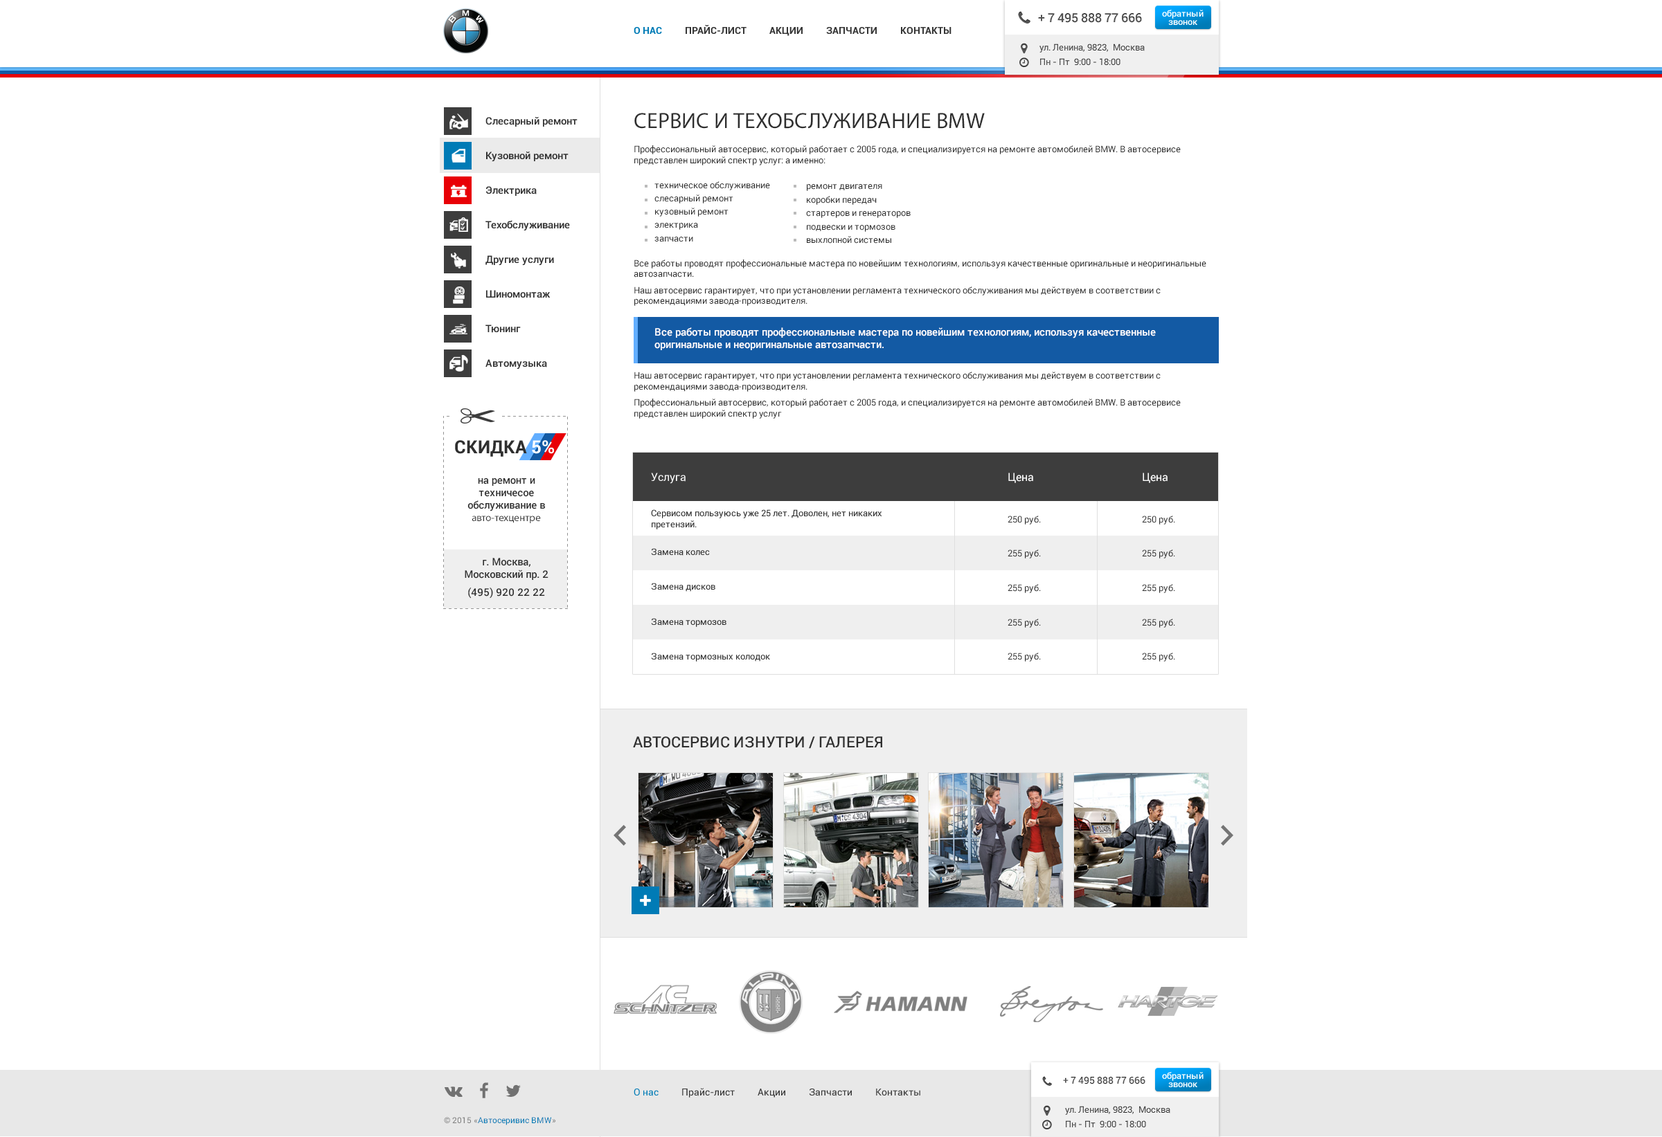
<style>
.page{position:relative;width:1662px;height:1137px;background:#ffffff}
.page>*{position:absolute;margin:0}
.t1{font:12.5px "Roboto-Medium";color:#515151;text-transform:uppercase}
.t2{font:9px/8.3px "Roboto-Medium";color:#ffffff}
.t3{font:9.7px "Roboto-Bold";color:#363636;text-transform:uppercase}
.t4{font:9.7px "Roboto-Bold";color:#007bb6;text-transform:uppercase}
.t5{font:9px "Roboto-Regular";color:#545454}
.t6{font:9px "Roboto-Regular";color:#2f2f2f}
.t7{font:22.2px "Roboto-Bold";color:#2f2f2f;text-transform:uppercase}
.t8{font:10.4px "Roboto-Medium";color:#ffffff}
.t9{font:10.4px/13.8px "Roboto-Medium";color:#2f2f2f}
.t10{font:18px "Roboto-Bold";color:#2f2f2f;text-transform:uppercase}
.t11{font:18px "Roboto-Bold";color:#ffffff;text-transform:uppercase}
.t12{font:11.1px "Roboto-Regular";color:#ffffff}
.t13{font:10.4px "Roboto-Medium";color:#2f2f2f}
.t14{font:10.4px "Roboto-Bold";color:#2f2f2f}
.t15{font:10.4px "Roboto-Bold";color:#ffffff}
.t16{font:15.2px "Roboto-Medium";color:#2f2f2f;text-transform:uppercase}
.t17{font:9.7px "Roboto-Medium";text-transform:uppercase}
.t18{font:9.7px "Roboto-Regular";color:#363636}
.t19{font:9.7px "Roboto-Regular";color:#007bb6}
.t20{font:8.3px "Roboto-Regular";color:#007bb6}
.t21{font:8.3px "Roboto-Regular";color:#7f7f7f}
</style>
<div class="page">
<p class="t1" style="left:1038px;top:13px;width:104px;height:10px">+ 7 495 888 77 666</p>
<p class="t2" style="left:1162px;top:10px;width:41px;height:15px;text-align:center">обратный<br>звонок</p>
<p class="t3" style="left:633px;top:25px;width:318px;height:11px"><span class="t4">О нас </span>          Прайс-лист           Акции           Запчасти           Контакты</p>
<p class="t5" style="left:1039px;top:44px;width:105px;height:21px">ул. Ленина, 9823,  Москва<br>Пн - Пт  9:00 - 18:00</p>
<p class="t6" style="left:633px;top:113px;width:573px;height:306px"><span class="t7">Сервис и техобслуживание BMW<br></span>Профессиональный автосервис, который работает с 2005 года, и специализируется на ремонте автомобилей BMW. В автосервисе представлен широкий спектр услуг: а именно:<br>техническое обслуживание<br>слесарный ремонт<br>кузовный ремонт<br>электрика<br>запчасти<br>Все работы проводят профессиональные мастера по новейшим технологиям, используя качественные оригинальные и неоригинальные автозапчасти. <br>Наш автосервис гарантирует, что при установлении регламента технического обслуживания мы действуем в соответствии с рекомендациями завода-производителя.<br><span class="t8">Все работы проводят профессиональные мастера по новейшим технологиям, используя качественные оригинальные и неоригинальные автозапчасти. <br></span>Наш автосервис гарантирует, что при установлении регламента технического обслуживания мы действуем в соответствии с рекомендациями завода-производителя.<br>Профессиональный автосервис, который работает с 2005 года, и специализируется на ремонте автомобилей BMW. В автосервисе представлен широкий спектр услуг</p>
<p class="t9" style="left:485px;top:117px;width:92px;height:252px">Слесарный ремонт<br>Кузовной ремонт<br>Электрика<br>Техобслуживание<br>Другие услуги<br>Шиномонтаж <br>Тюнинг<br>Автомузыка</p>
<p class="t6" style="left:806px;top:184px;width:104px;height:60px">ремонт двигателя<br>коробки передач<br>стартеров и генераторов<br>подвески и тормозов<br>выхлопной системы</p>
<p class="t10" style="left:455px;top:440px;width:99px;height:17px">скидкА <span class="t11">5%</span></p>
<p class="t6" style="left:1007px;top:473px;width:34px;height:189px"><span class="t12">Цена</span><br>250 руб.<br>255 руб.<br>255 руб.<br>255 руб.<br>255 руб.</p>
<p class="t6" style="left:1142px;top:473px;width:33px;height:189px"><span class="t12">Цена</span><br>250 руб.<br>255 руб.<br>255 руб.<br>255 руб.<br>255 руб.</p>
<p class="t13" style="left:465px;top:478px;width:83px;height:121px;text-align:center">на ремонт и техничесое обслуживание в <span class="t14">авто-техцентре                     </span><span class="t15">”<br></span>г. Москва, Московский пр. 2<br>(495) 920 22 22</p>
<p class="t16" style="left:633px;top:737px;width:249px;height:12px">автосервис изнутри / Галерея</p>
<p class="t2" style="left:1162px;top:1072px;width:41px;height:16px;text-align:center">обратный<br>звонок</p>
<p class="t17" style="left:1063px;top:1077px;width:82px;height:8px">+ 7 495 888 77 666</p>
<p class="t18" style="left:633px;top:1088px;width:287px;height:10px"><span class="t19">О нас </span>          Прайс-лист           Акции           Запчасти           Контакты</p>
<p class="t5" style="left:1065px;top:1106px;width:105px;height:22px">ул. Ленина, 9823,  Москва<br>Пн - Пт  9:00 - 18:00</p>
<p class="t20" style="left:444px;top:1117px;width:112px;height:9px"><span class="t21">© 2015 «</span>Автосеривис BMW<span class="t21">»</span></p>
</div>
